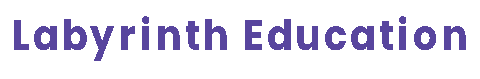
<style>
.page{position:relative;width:480px;height:79px;background:#ffffff}
.page>*{position:absolute;margin:0}
.t1{font:42.3px "Poppins-Bold";letter-spacing:0.1em;color:#58459e;scale:0.9 1}
</style>
<div class="page">
<p class="t1" style="left:14px;top:16px;width:452px;height:45px">Labyrinth Education</p>
</div>
